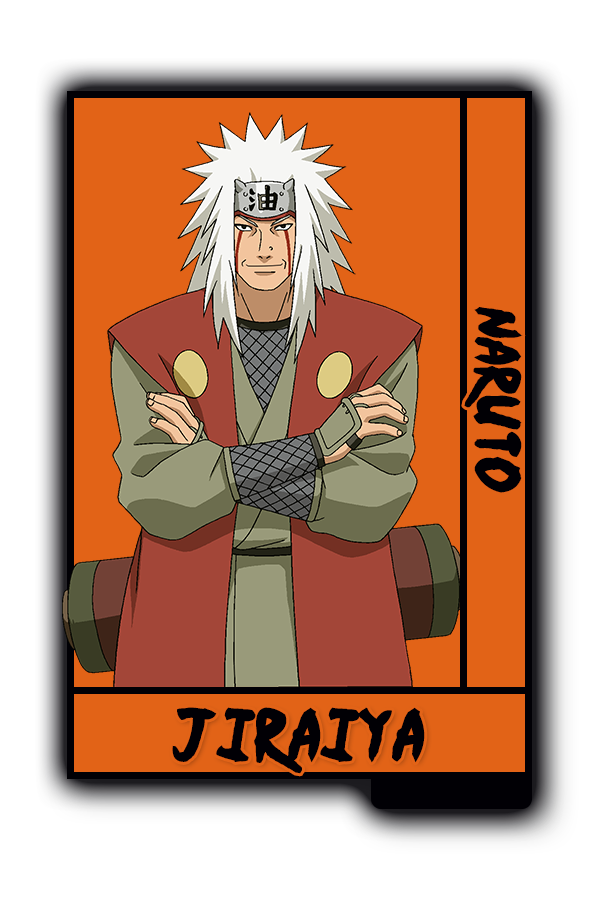
<style>
.page{position:relative;width:600px;height:900px;background:#e26317}
.page>*{position:absolute;margin:0}
.t1{font:52px "Ninja-Naruto";color:#010005}
.t2{font:60.3px "Ninja-Naruto";color:#010005}
</style>
<div class="page">
<p class="t1" style="left:464px;top:307px;width:59px;height:186px;rotate:90deg">Naruto</p>
<p class="t2" style="left:172px;top:707px;width:253px;height:67px">Jiraiya</p>
</div>
